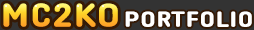
<style>
.page{position:relative;width:254px;height:30px;background:#333333}
.page>*{position:absolute;margin:0}
.t1{font:30px "Cafe24SsurroundOTF";letter-spacing:0.05em;font-weight:bold}
.t2{font:20px "Cafe24SsurroundOTF";letter-spacing:0.05em;color:#ffffff;font-weight:bold}
</style>
<div class="page">
<p class="t1" style="left:3px;top:3px;width:115px;height:24px">MC2KO</p>
<p class="t2" style="left:125px;top:11px;width:127px;height:16px">PORTFOLIO</p>
</div>
